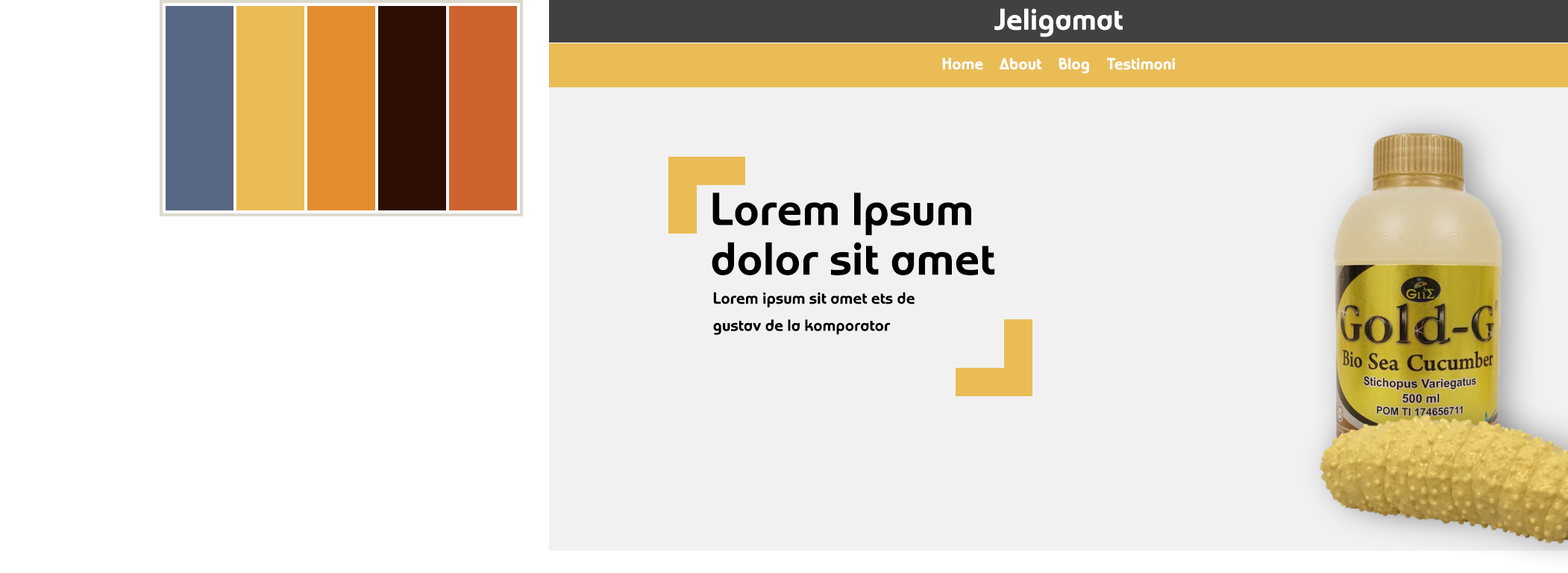
<style>
.page{position:relative;width:1568px;height:573px;background:#f1f1f1}
.page>*{position:absolute;margin:0}
.t1{font:29.7px "WorldofWater-Regular";color:#ffffff}
.t2{font:16.1px "WorldofWater-Regular";color:#ffffff}
.t3{font:46.1px/34px "WorldofWater-Regular";color:#000000}
.t4{font:16.1px/11.6px "WorldofWater-Regular";color:#000000}
</style>
<div class="page">
<p class="t1" style="left:994px;top:8px;width:129px;height:29px">Jeligamat</p>
<p class="t2" style="left:942px;top:57px;width:41px;height:13px">Home</p>
<p class="t2" style="left:999px;top:57px;width:43px;height:13px">About</p>
<p class="t2" style="left:1059px;top:57px;width:30px;height:17px">Blog</p>
<p class="t2" style="left:1107px;top:57px;width:69px;height:13px">Testimoni</p>
<p class="t3" style="left:712px;top:192px;width:283px;height:83px">Lorem Ipsum<br>dolor sit amet</p>
<p class="t4" style="left:713px;top:292px;width:202px;height:43px">Lorem ipsum sit amet ets de<br>gustav de la komporator</p>
</div>
